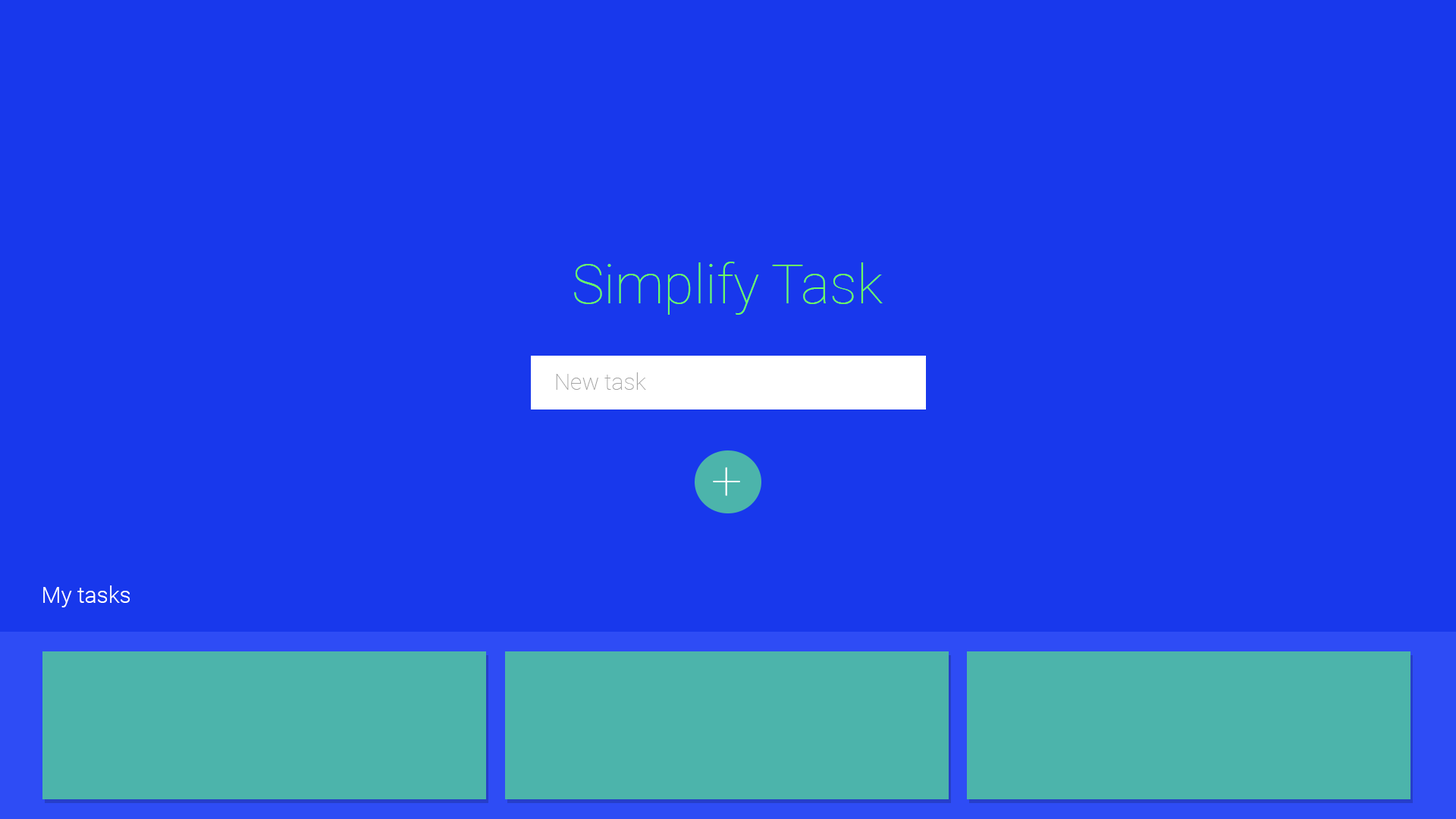
<style>
.page{position:relative;width:1456px;height:819px;background:#1838ec}
.page>*{position:absolute;margin:0}
.t1{font:54.6px "Roboto-Thin";color:#6dff62}
.t2{font:22.7px "Roboto-Thin";color:#a3a3a3}
.t3{font:54.6px "Roboto-Thin";color:#ffffff}
.t4{font:22.7px "Roboto-Light";color:#ffffff}
</style>
<div class="page">
<p class="t1" style="left:574px;top:262px;width:309px;height:53px">Simplify Task</p>
<p class="t2" style="left:556px;top:372px;width:90px;height:18px">New task</p>
<p class="t3" style="left:713px;top:467px;width:27px;height:29px">+</p>
<p class="t4" style="left:43px;top:585px;width:87px;height:22px">My tasks</p>
</div>
